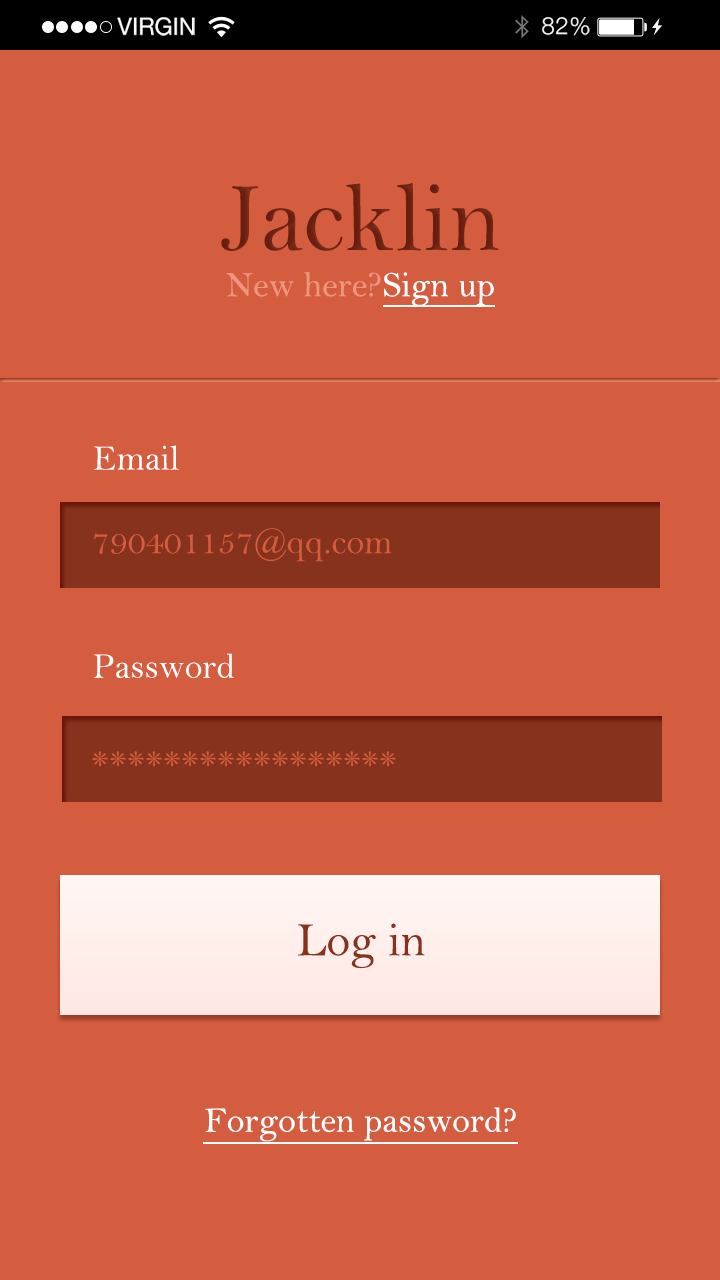
<style>
.page{position:relative;width:720px;height:1280px;background:#d45d3f}
.page>*{position:absolute;margin:0}
.t1{font:23.9px "HelveticaNeue";color:#ffffff;text-transform:uppercase}
.t2{font:23.9px "HelveticaNeue-Light";letter-spacing:0.025em;color:#ffffff}
.t3{font:100px "BellMT";color:#6b2011}
.t4{font:36px "BellMT";color:#ee957e}
.t5{font:36px "BellMT";color:#ffffff}
.t6{font:36px "BellMT";color:#d45d3f}
.t7{font:48px "BellMT";color:#87321c}
</style>
<div class="page">
<p class="t1" style="left:117px;top:17px;width:78px;height:19px">Virgin</p>
<p class="t2" style="left:542px;top:17px;width:48px;height:19px">82%</p>
<p class="t3" style="left:221px;top:183px;width:278px;height:68px">Jacklin</p>
<p class="t4" style="left:226px;top:272px;width:268px;height:34px">New here?<span class="t5">Sign up</span></p>
<p class="t5" style="left:93px;top:445px;width:86px;height:25px">Email</p>
<p class="t6" style="left:94px;top:528px;width:298px;height:34px">790401157@qq.com</p>
<p class="t5" style="left:94px;top:653px;width:140px;height:25px">Password</p>
<p class="t6" style="left:92px;top:751px;width:304px;height:16px">*****************</p>
<p class="t7" style="left:297px;top:923px;width:128px;height:46px">Log in</p>
<p class="t5" style="left:205px;top:1107px;width:311px;height:35px">Forgotten password?</p>
</div>
